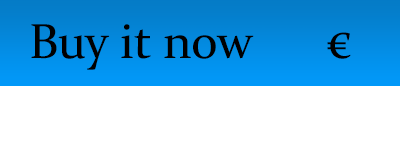
<style>
.page{position:relative;width:400px;height:141px;background:#ffffff}
.page>*{position:absolute;margin:0}
.t1{font:49.1px "Constantia";color:#000000}
</style>
<div class="page">
<p class="t1" style="left:31px;top:24px;width:320px;height:46px">Buy it now      €</p>
</div>
